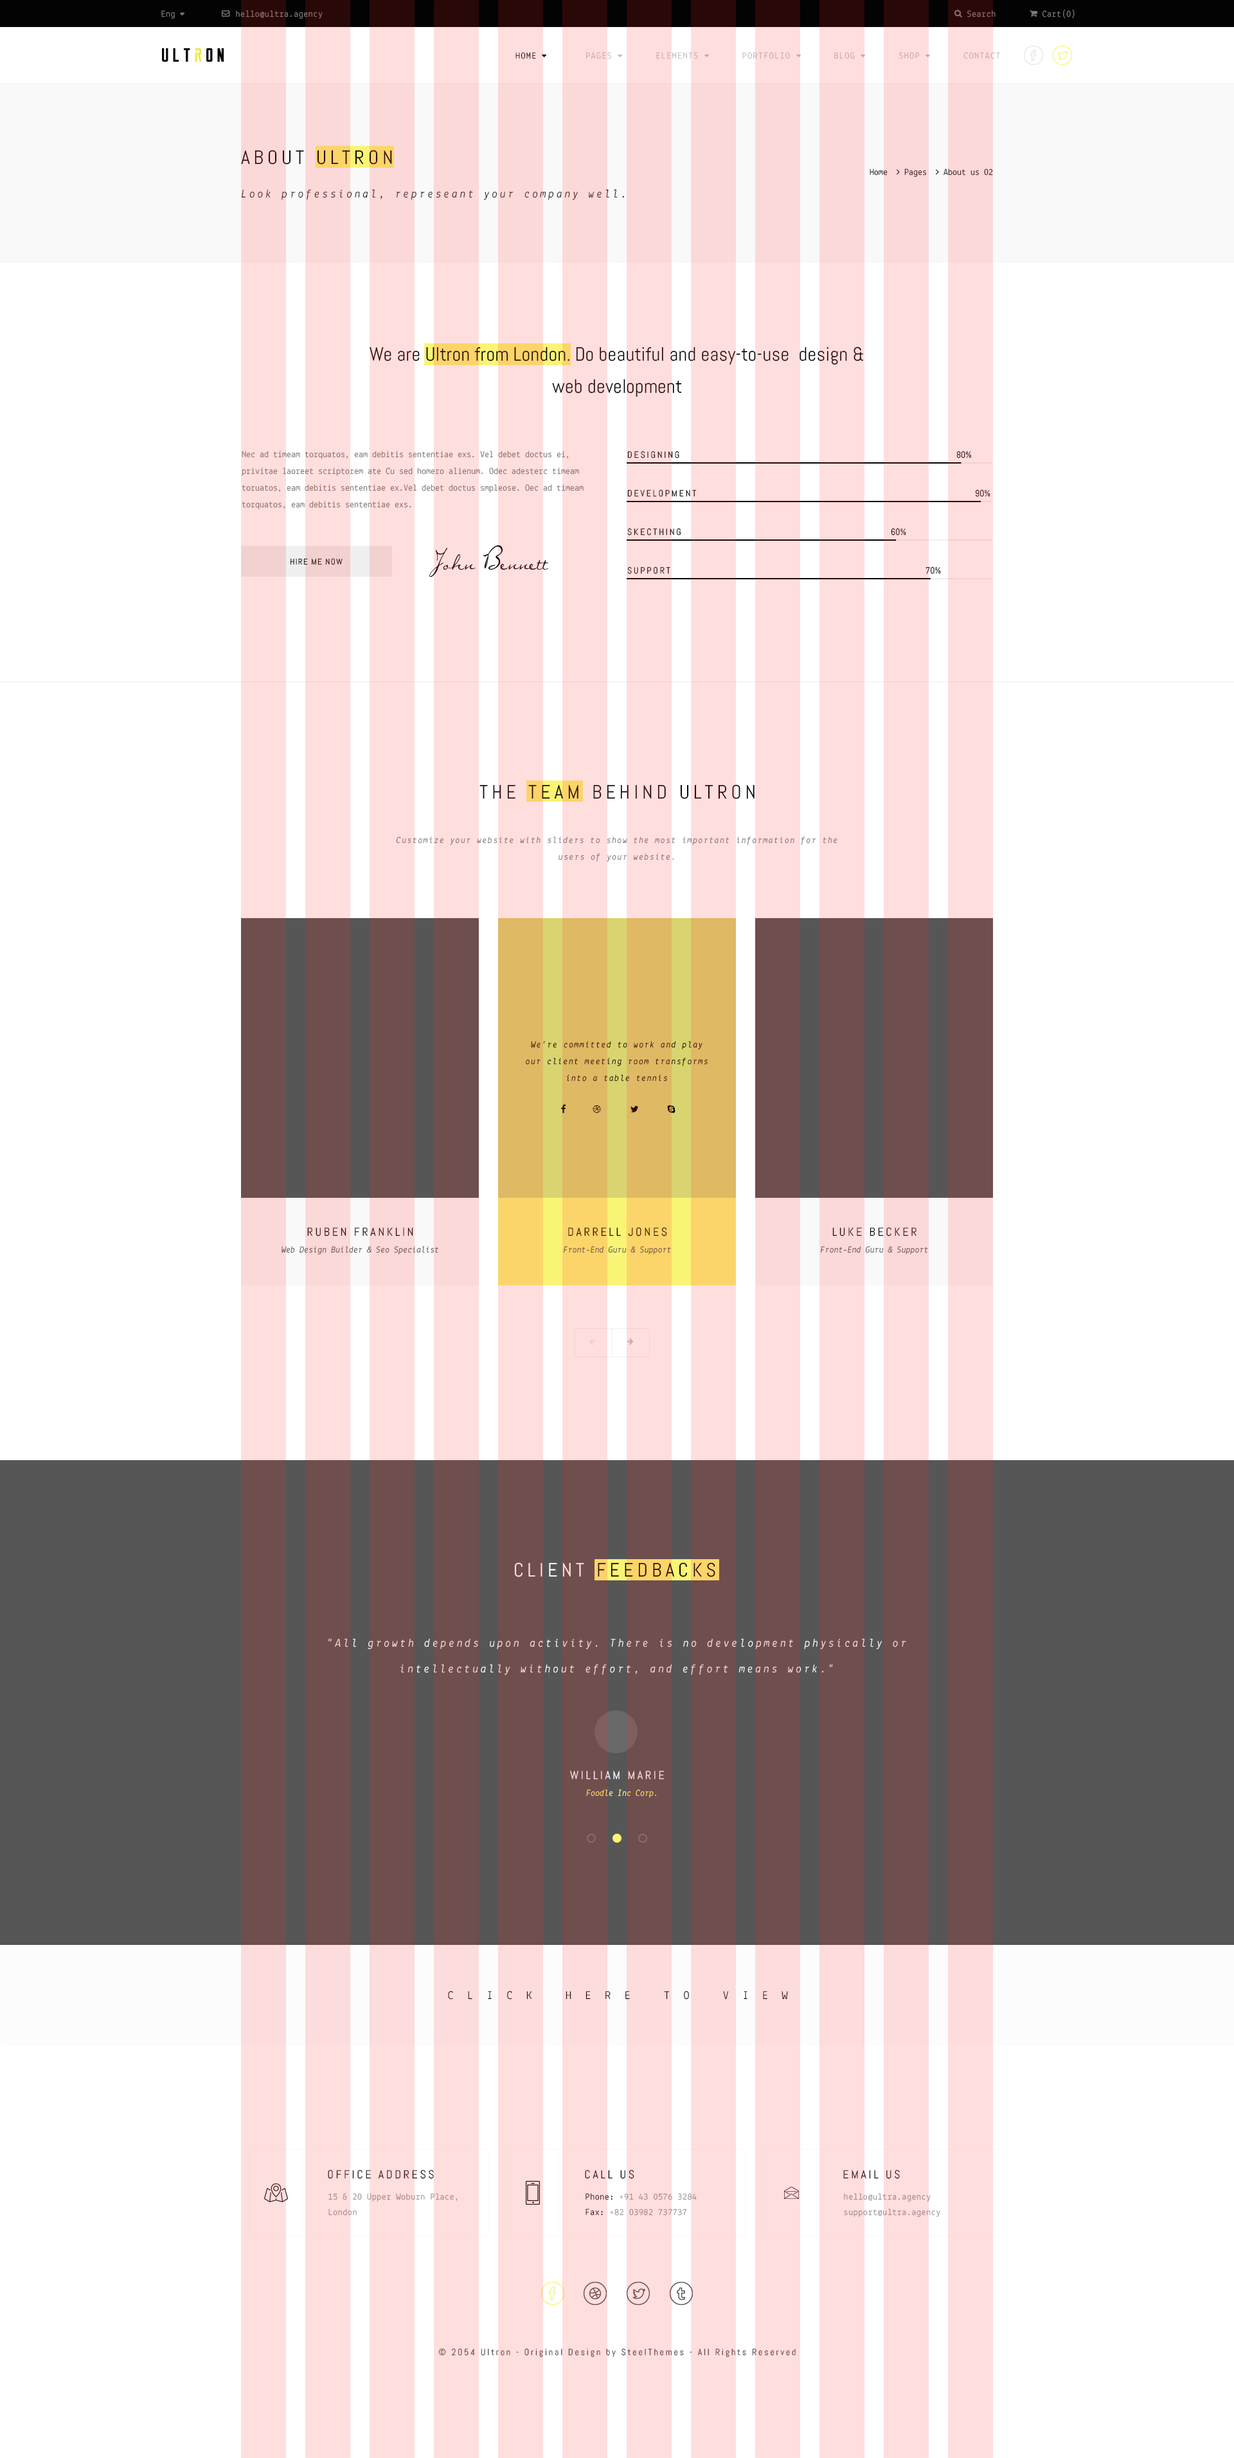
<style>
.page{position:relative;width:1234px;height:2458px;background:#ffffff}
.page>*{position:absolute;margin:0}
.t1{font:9px "Lekton-Regular";letter-spacing:0.04em;color:#787878}
.t2{font:9px "Lekton-Regular";letter-spacing:0.1em;color:#bfbfbf;text-transform:uppercase}
.t3{font:9px "Lekton-Regular";letter-spacing:0.1em;color:#030303;text-transform:uppercase}
.t4{font:19.3px "Abel-Regular";letter-spacing:0.2em;color:#2f0e0e;text-transform:uppercase}
.t5{font:11.6px "Lekton-Italic";letter-spacing:0.2em}
.t6{font:19.3px/32.1px "Abel-Regular";color:#290808}
.t7{font:9px/16.7px "Lekton-Regular";color:#8c6b6b}
.t8{font:9px "Abel-Regular";letter-spacing:0.2em;text-transform:uppercase}
.t9{font:9px "Abel-Regular";color:#290808}
.t10{font:9px "Abel-Regular";letter-spacing:0.2em;color:#290808;text-transform:uppercase}
.t11{font:8.4px "Abel-Regular";letter-spacing:0.1em;color:#290808;text-transform:uppercase}
.t12{font:9px "Abel-Regular";color:#160505}
.t13{font:19.3px "Abel-Regular";letter-spacing:0.2em;text-transform:uppercase}
.t14{font:9px/16.7px "Lekton-Italic";letter-spacing:0.1em;color:#827171}
.t15{font:9px/16.7px "Lekton-Italic";letter-spacing:0.1em;color:#290808}
.t16{font:9px/16.7px "Lekton-Italic";color:#290808}
.t17{font:11.6px/45px "Abel-Regular";letter-spacing:0.2em;color:#290808;text-transform:uppercase}
.t18{font:9px/16.7px "Lekton-Italic"}
.t19{font:11.6px/45px "Abel-Regular";letter-spacing:0.2em;text-transform:uppercase}
.t20{font:11.6px/25.7px "Lekton-Italic";letter-spacing:0.2em;color:#ffdede}
.t21{font:9px/16.7px "Lekton-Italic";color:#ffdede}
.t22{font:11.6px/45px "Abel-Regular";letter-spacing:0.2em;color:#ffdede;text-transform:uppercase}
.t23{font:11.6px "Lekton-Regular";letter-spacing:1.2em;color:#290808;text-transform:uppercase}
.t24{font:11.6px "Abel-Regular";letter-spacing:0.2em;text-transform:uppercase}
.t25{font:9px/15.4px "Lekton-Regular";letter-spacing:0.04em;color:#969595}
.t26{font:9px/15.4px "Lekton-Regular";letter-spacing:0.04em;color:#030303}
.t27{font:9px "Abel-Regular";letter-spacing:0.2em;color:#694848}
</style>
<div class="page">
<p class="t1" style="left:161px;top:10px;width:14px;height:9px">Eng</p>
<p class="t1" style="left:236px;top:10px;width:87px;height:9px">hello@ultra.agency</p>
<p class="t1" style="left:968px;top:10px;width:28px;height:7px">Search</p>
<p class="t1" style="left:1043px;top:9px;width:32px;height:10px">Cart(0)</p>
<p class="t2" style="left:516px;top:52px;width:484px;height:7px"><span class="t3">Home         </span>Pages        Elements        Portfolio        Blog        Shop        Contact</p>
<p class="t4" style="left:241px;top:150px;width:151px;height:15px">About Ultron</p>
<p class="t5" style="left:241px;top:189px;width:383px;height:11px">Look professional, represeant your company well.</p>
<p class="t6" style="left:370px;top:346px;width:493px;height:51px;text-align:center">We are Ultron from London. Do beautiful and easy-to-use  design &amp; web development</p>
<p class="t7" style="left:242px;top:451px;width:342px;height:58px">Nec ad timeam torquatos, eam debitis sententiae exs. Vel debet doctus ei, privitae laoreet scriptorem ate Cu sed homero alienum. Odec adesterc timeam toruatos, eam debitis sententiae ex.Vel debet doctus smpleose. Oec ad timeam torquatos, eam debitis sententiae exs.</p>
<p class="t8" style="left:627px;top:451px;width:53px;height:7px">Designing</p>
<p class="t9" style="left:957px;top:451px;width:14px;height:7px">80%</p>
<p class="t10" style="left:627px;top:489px;width:70px;height:8px">Development</p>
<p class="t9" style="left:975px;top:489px;width:16px;height:8px">90%</p>
<p class="t10" style="left:627px;top:528px;width:54px;height:8px">Skecthing</p>
<p class="t9" style="left:891px;top:528px;width:15px;height:8px">60%</p>
<p class="t11" style="left:291px;top:558px;width:52px;height:7px">Hire me now</p>
<p class="t10" style="left:627px;top:566px;width:43px;height:8px">Support</p>
<p class="t12" style="left:926px;top:566px;width:15px;height:8px">70%</p>
<p class="t13" style="left:480px;top:784px;width:275px;height:15px">The team behind Ultron</p>
<p class="t14" style="left:396px;top:836px;width:442px;height:25px;text-align:center">Customize your website with sliders to show the most important information for the users of your website.</p>
<p class="t15" style="left:526px;top:1041px;width:182px;height:40px;text-align:center">We’re committed to work and play our client meeting room transforms  into a table tennis</p>
<p class="t16" style="left:282px;top:1227px;width:156px;height:27px;text-align:center"><span class="t17">Ruben Franklin<br></span>Web Design Builder &amp; Seo Specialist</p>
<p class="t16" style="left:564px;top:1227px;width:107px;height:27px;text-align:center"><span class="t17">Darrell jones<br></span>Front-End Guru &amp; Support</p>
<p class="t18" style="left:821px;top:1227px;width:107px;height:27px;text-align:center"><span class="t19">Luke becker<br></span>Front-End Guru &amp; Support</p>
<p class="t20" style="left:328px;top:1638px;width:578px;height:37px;text-align:center">"All growth depends upon activity. There is no development physically or<br>intellectually without effort, and effort means work."</p>
<p class="t21" style="left:570px;top:1770px;width:95px;height:27px;text-align:center"><span class="t22">William marie  <br></span>Foodle Inc Corp.</p>
<p class="t23" style="left:448px;top:1990px;width:340px;height:9px">Click here to view</p>
<p class="t24" style="left:328px;top:2170px;width:106px;height:9px">Office Address</p>
<p class="t24" style="left:585px;top:2170px;width:49px;height:9px">Call us</p>
<p class="t24" style="left:843px;top:2170px;width:57px;height:9px">Email us</p>
<p class="t25" style="left:328px;top:2193px;width:130px;height:22px">15 &amp; 20 Upper Woburn Place,<br>London</p>
<p class="t25" style="left:586px;top:2193px;width:111px;height:22px"><span class="t26">Phone:</span> +91 43 0576 3284<br><span class="t26">Fax:</span> +82 03982 737737</p>
<p class="t25" style="left:844px;top:2193px;width:97px;height:24px">hello@ultra.agency<br>support@ultra.agency</p>
<p class="t27" style="left:438px;top:2348px;width:358px;height:9px">© 2054 Ultron - Original Design by SteelThemes - All Rights Reserved</p>
</div>
